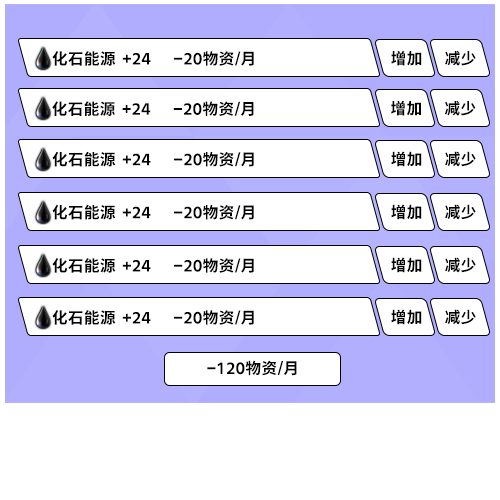
<style>
.page{position:relative;width:500px;height:500px;background:#ffffff}
.page>*{position:absolute;margin:0}
.t1{font:12px "LXGW975GothicSC-600W";color:#000000}
</style>
<div class="page">
<p class="t1" style="left:52px;top:51px;width:64px;height:15px">化石能源</p>
<p class="t1" style="left:122px;top:51px;width:132px;height:15px">+24      -20物资/月</p>
<p class="t1" style="left:391px;top:50px;width:31px;height:16px">增加</p>
<p class="t1" style="left:445px;top:51px;width:31px;height:15px">减少</p>
<p class="t1" style="left:52px;top:101px;width:63px;height:15px">化石能源</p>
<p class="t1" style="left:122px;top:101px;width:132px;height:15px">+24      -20物资/月</p>
<p class="t1" style="left:391px;top:100px;width:30px;height:16px">增加</p>
<p class="t1" style="left:444px;top:101px;width:32px;height:15px">减少</p>
<p class="t1" style="left:52px;top:151px;width:64px;height:16px">化石能源</p>
<p class="t1" style="left:122px;top:152px;width:132px;height:15px">+24      -20物资/月</p>
<p class="t1" style="left:391px;top:151px;width:31px;height:16px">增加</p>
<p class="t1" style="left:445px;top:151px;width:31px;height:16px">减少</p>
<p class="t1" style="left:52px;top:204px;width:64px;height:16px">化石能源</p>
<p class="t1" style="left:122px;top:205px;width:132px;height:15px">+24      -20物资/月</p>
<p class="t1" style="left:391px;top:204px;width:31px;height:16px">增加</p>
<p class="t1" style="left:445px;top:204px;width:31px;height:16px">减少</p>
<p class="t1" style="left:391px;top:257px;width:31px;height:16px">增加</p>
<p class="t1" style="left:445px;top:257px;width:31px;height:16px">减少</p>
<p class="t1" style="left:52px;top:258px;width:64px;height:15px">化石能源</p>
<p class="t1" style="left:122px;top:258px;width:132px;height:15px">+24      -20物资/月</p>
<p class="t1" style="left:52px;top:310px;width:64px;height:15px">化石能源</p>
<p class="t1" style="left:122px;top:310px;width:132px;height:15px">+24      -20物资/月</p>
<p class="t1" style="left:391px;top:309px;width:31px;height:16px">增加</p>
<p class="t1" style="left:445px;top:309px;width:31px;height:16px">减少</p>
<p class="t1" style="left:207px;top:360px;width:90px;height:16px">-120物资/月</p>
</div>
